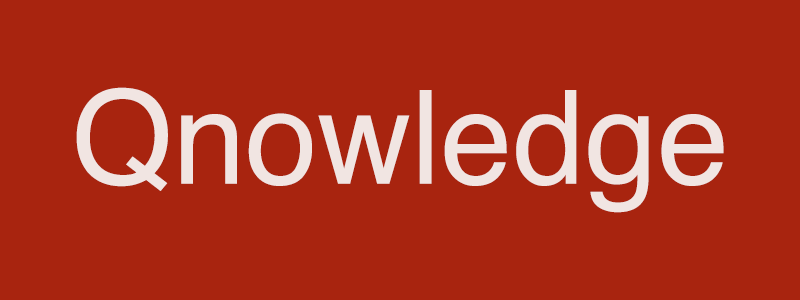
<style>
.page{position:relative;width:800px;height:300px;background:#a8240f}
.page>*{position:absolute;margin:0}
.t1{font:130px "Helvetica";color:#f1e5e2}
</style>
<div class="page">
<p class="t1" style="left:76px;top:87px;width:648px;height:126px">Qnowledge</p>
</div>
